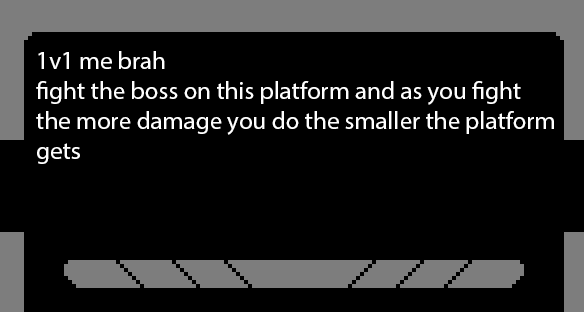
<style>
.page{position:relative;width:584px;height:312px;background:#000000}
.page>*{position:absolute;margin:0}
.t1{font:25px "MyriadPro-Regular";color:#ffffff}
</style>
<div class="page">
<p class="t1" style="left:36px;top:51px;width:518px;height:113px">1v1 me brah<br>fight the boss on this platform and as you fight<br>the more damage you do the smaller the platform<br>gets</p>
</div>
